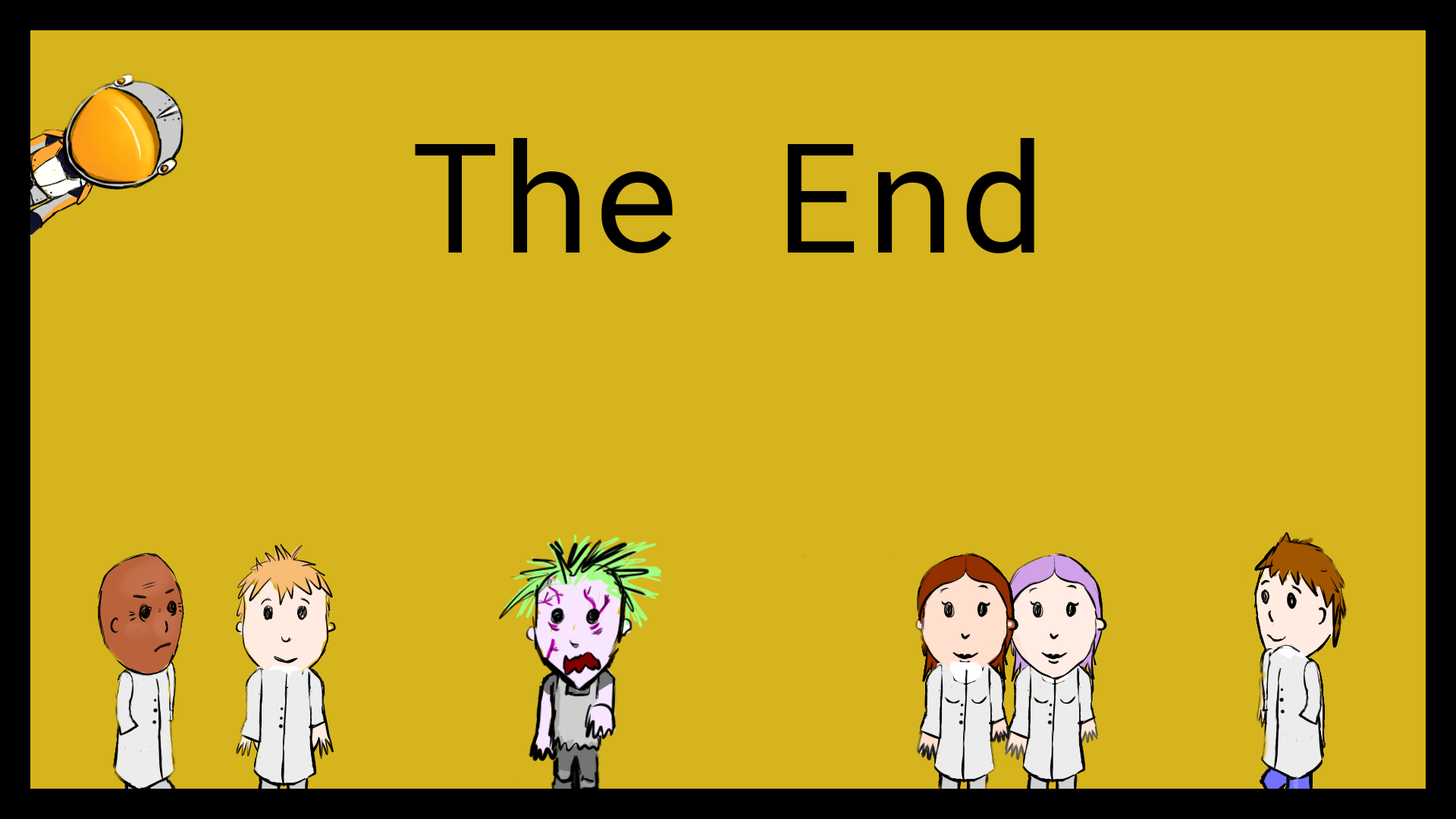
<style>
.page{position:relative;width:1456px;height:819px;background:#d5b41e}
.page>*{position:absolute;margin:0}
.t1{font:151.7px "RobotoMono-Regular";color:#000000}
</style>
<div class="page">
<p class="t1" style="left:415px;top:138px;width:619px;height:115px">The End</p>
</div>
